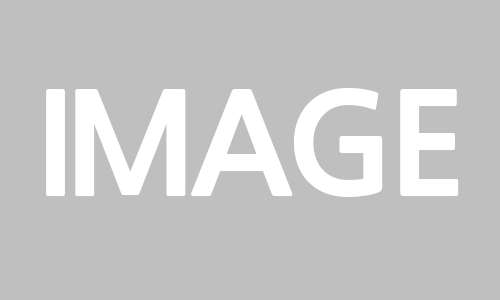
<style>
.page{position:relative;width:500px;height:300px;background:#bfbfbf}
.page>*{position:absolute;margin:0}
.t1{font:138px "NanumGothicExtraBold";letter-spacing:-0.05em;color:#ffffff;text-transform:uppercase}
</style>
<div class="page">
<p class="t1" style="left:46px;top:88px;width:413px;height:109px">imAge</p>
</div>
